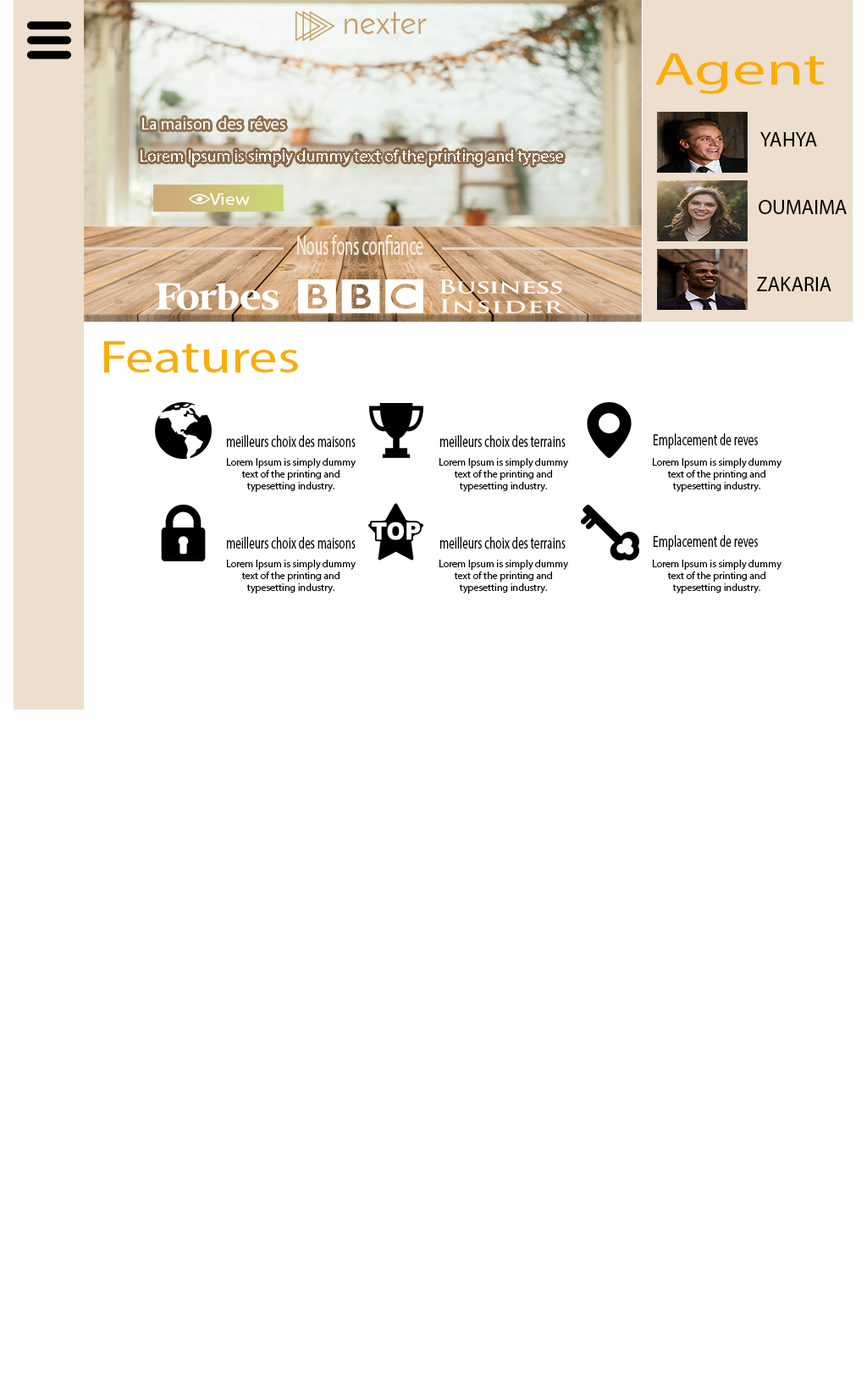
<style>
.page{position:relative;width:867px;height:1375px;background:#ffffff}
.page>*{position:absolute;margin:0}
.t1{font:45.5px "MyriadPro-Regular";color:#faad07;scale:1.48 1}
.t2{font:16.6px "MyriadPro-Regular";color:#ffffff}
.t3{font:20.3px "MyriadPro-Regular";color:#000000}
.t4{font:17.4px "MyriadPro-Regular";color:#ffffff;scale:1.14 1}
.t5{font:28px "MyriadPro-Regular";color:#f5ece2;scale:0.54 1}
.t6{font:45.5px "MyriadPro-Regular";color:#faad07;scale:1.24 1}
.t7{font:16.4px "MyriadPro-Regular";color:#000000;scale:0.68 1}
.t8{font:10.2px "MyriadPro-Regular";color:#000000}
</style>
<div class="page">
<p class="t1" style="left:655px;top:53px;width:169px;height:41px">Agent</p>
<p class="t2" style="left:142px;top:118px;width:143px;height:12px">La maison  des  réves</p>
<p class="t3" style="left:760px;top:132px;width:57px;height:14px">YAHYA</p>
<p class="t2" style="left:141px;top:150px;width:422px;height:15px">Lorem Ipsum is simply dummy text of the printing and typese</p>
<p class="t4" style="left:209px;top:193px;width:41px;height:12px">View</p>
<p class="t3" style="left:759px;top:200px;width:88px;height:14px">OUMAIMA</p>
<p class="t5" style="left:297px;top:235px;width:126px;height:20px">Nous fons confiance</p>
<p class="t3" style="left:757px;top:277px;width:75px;height:14px">ZAKARIA</p>
<p class="t6" style="left:104px;top:341px;width:194px;height:32px">Features</p>
<p class="t7" style="left:227px;top:435px;width:129px;height:12px">meilleurs choix des maisons</p>
<p class="t7" style="left:440px;top:435px;width:126px;height:12px">meilleurs choix des terrains</p>
<p class="t7" style="left:654px;top:434px;width:104px;height:15px">Emplacement de reves</p>
<p class="t8" style="left:227px;top:458px;width:129px;height:34px;text-align:center">Lorem Ipsum is simply dummy<br> text of the printing and <br>typesetting industry.</p>
<p class="t8" style="left:439px;top:458px;width:129px;height:34px;text-align:center">Lorem Ipsum is simply dummy<br> text of the printing and <br>typesetting industry.</p>
<p class="t8" style="left:653px;top:458px;width:129px;height:34px;text-align:center">Lorem Ipsum is simply dummy<br> text of the printing and <br>typesetting industry.</p>
<p class="t7" style="left:227px;top:537px;width:129px;height:12px">meilleurs choix des maisons</p>
<p class="t7" style="left:440px;top:537px;width:126px;height:12px">meilleurs choix des terrains</p>
<p class="t7" style="left:654px;top:535px;width:104px;height:15px">Emplacement de reves</p>
<p class="t8" style="left:227px;top:560px;width:129px;height:34px;text-align:center">Lorem Ipsum is simply dummy<br> text of the printing and <br>typesetting industry.</p>
<p class="t8" style="left:439px;top:560px;width:129px;height:34px;text-align:center">Lorem Ipsum is simply dummy<br> text of the printing and <br>typesetting industry.</p>
<p class="t8" style="left:653px;top:560px;width:129px;height:34px;text-align:center">Lorem Ipsum is simply dummy<br> text of the printing and <br>typesetting industry.</p>
</div>
